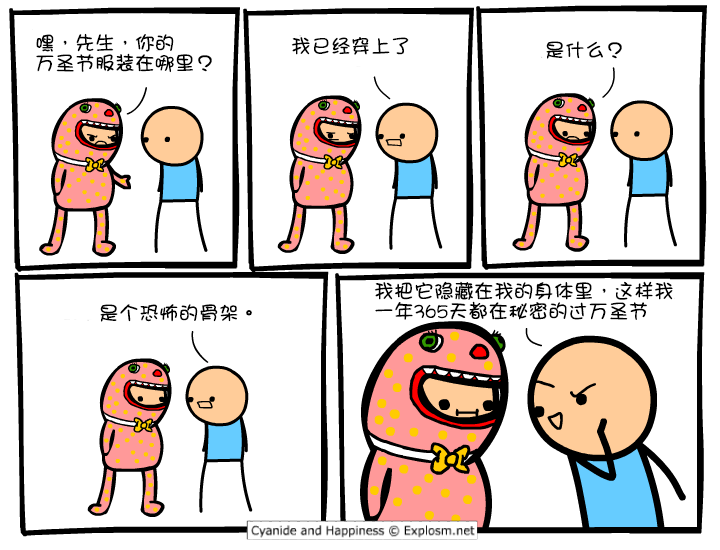
<style>
.page{position:relative;width:720px;height:550px;background:#ffffff}
.page>*{position:absolute;margin:0}
.t1{font:20px/20px "DFGirl";color:#000000}
.t2{font:20px "DFGirl";color:#000000}
</style>
<div class="page">
<p class="t1" style="left:36px;top:33px;width:176px;height:40px">嘿，先生，你的<br>万圣节服装在哪里？</p>
<p class="t2" style="left:291px;top:37px;width:118px;height:18px">我已经穿上了</p>
<p class="t2" style="left:546px;top:41px;width:76px;height:18px">是什么？</p>
<p class="t1" style="left:374px;top:281px;width:299px;height:39px">我把它隐藏在我的身体里，这样我<br>一年365天都在秘密的过万圣节</p>
<p class="t2" style="left:100px;top:304px;width:152px;height:18px">是个恐怖的骨架。</p>
</div>
